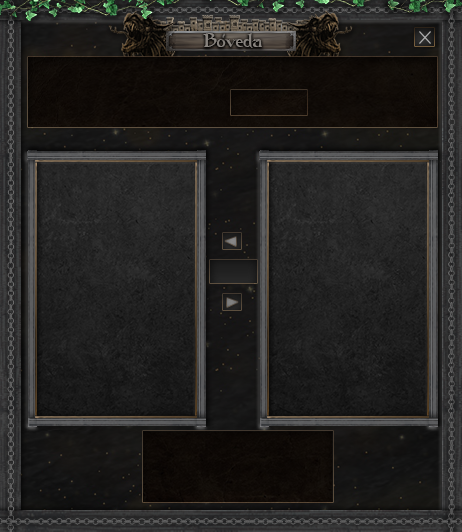
<style>
.page{position:relative;width:462px;height:532px}
.page>*{position:absolute;margin:0}
.t1{font:18.1px "Folkard";color:#88837e}
</style>
<div class="page">
<p class="t1" style="left:203px;top:33px;width:59px;height:15px">Boveda</p>
</div>
